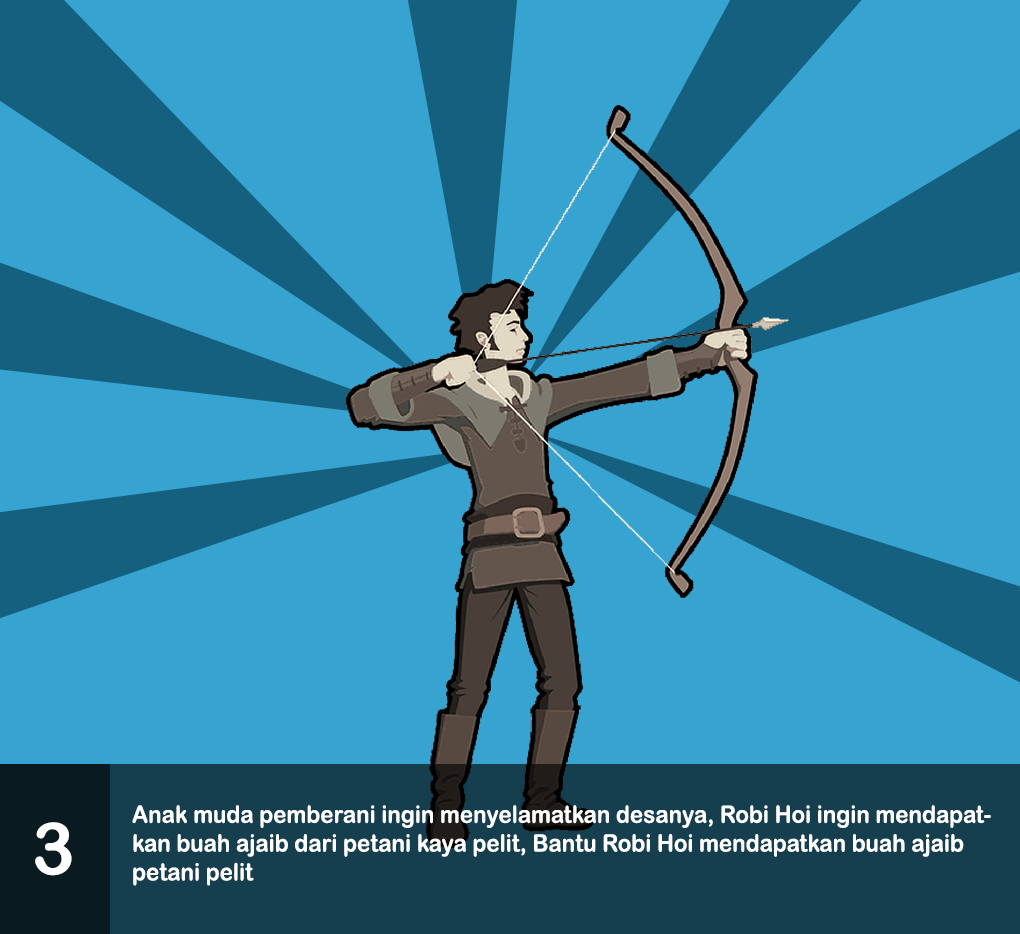
<style>
.page{position:relative;width:1020px;height:934px;background:#36a3d0}
.page>*{position:absolute;margin:0}
.t1{font:24px "ArialRoundedMTBold";color:#ffffff;scale:0.93 1}
.t2{font:72px "ArialRoundedMTBold";color:#ffffff}
</style>
<div class="page">
<p class="t1" style="left:132px;top:805px;width:859px;height:81px">Anak muda pemberani ingin menyelamatkan desanya, Robi Hoi ingin mendapatkan buah ajaib dari petani kaya pelit, Bantu Robi Hoi mendapatkan buah ajaib petani pelit</p>
<p class="t2" style="left:35px;top:822px;width:37px;height:54px">3</p>
</div>
